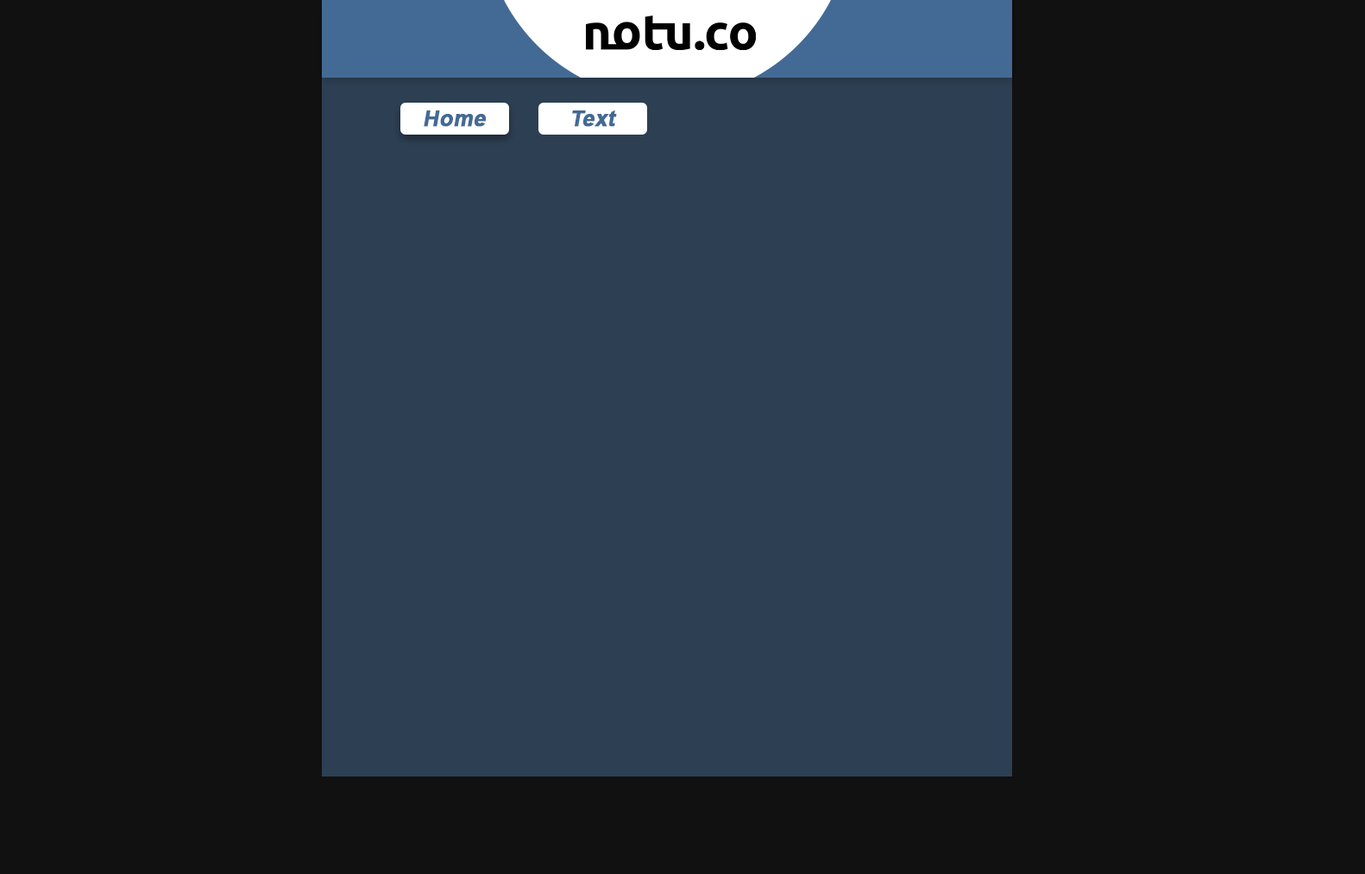
<style>
.page{position:relative;width:1365px;height:874px;background:#111111}
.page>*{position:absolute;margin:0}
.t1{font:21.8px "Arial-BoldMT";color:#436a95;font-weight:bold;font-style:italic}
</style>
<div class="page">
<p class="t1" style="left:424px;top:110px;width:63px;height:17px">Home</p>
<p class="t1" style="left:572px;top:110px;width:45px;height:17px">Text</p>
</div>
